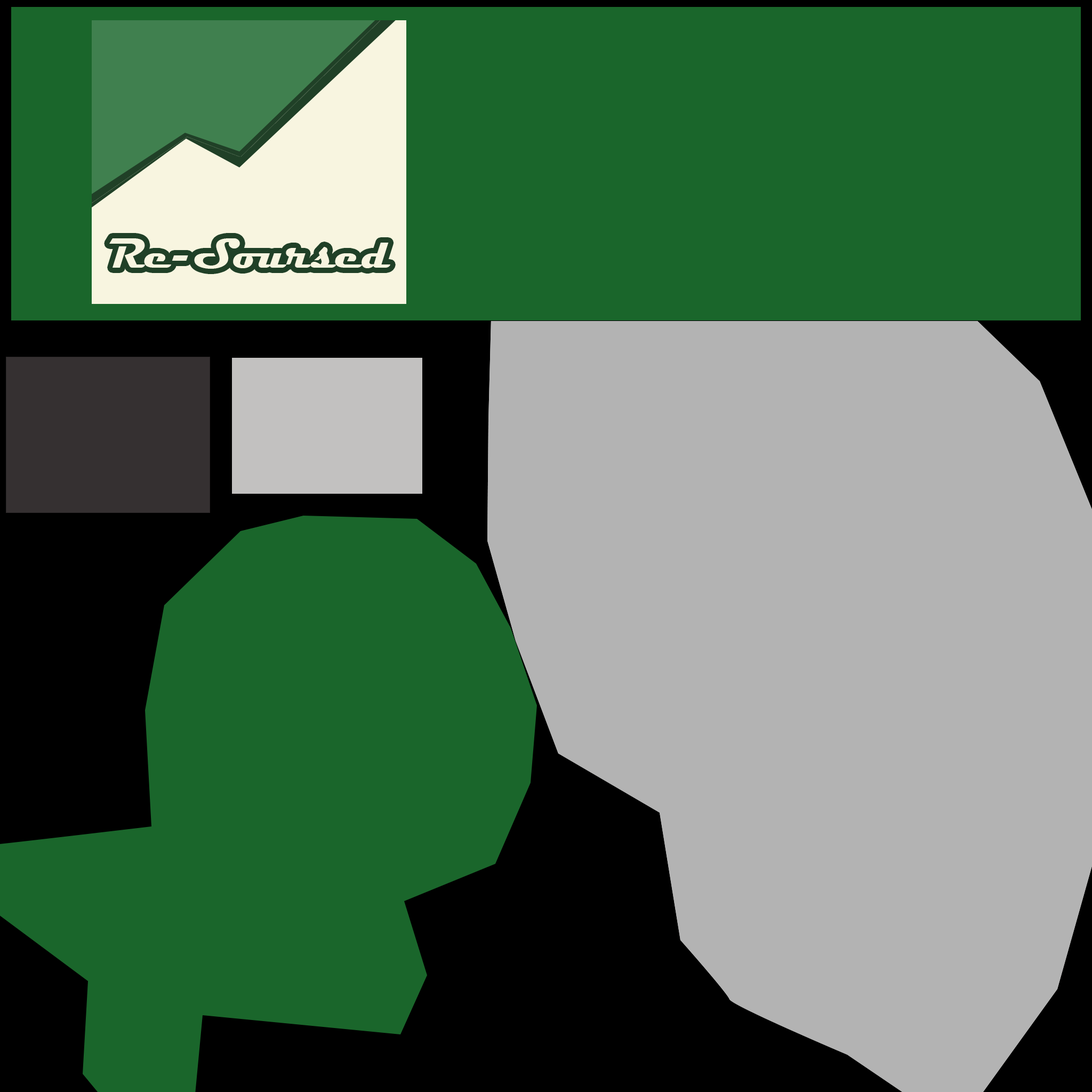
<style>
.page{position:relative;width:1092px;height:1092px;background:#1a662b}
.page>*{position:absolute;margin:0}
.t1{font:42.7px "Magneto-Bold";color:#f8f5e0}
</style>
<div class="page">
<p class="t1" style="left:109px;top:238px;width:281px;height:31px">Re-Soursed</p>
</div>
